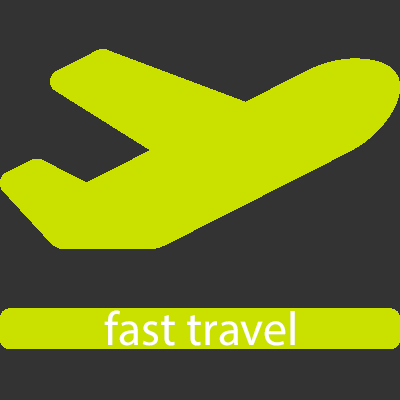
<style>
.page{position:relative;width:400px;height:400px;background:#333333}
.page>*{position:absolute;margin:0}
.t1{font:48px "MyriadPro-Regular";color:#ffffff}
</style>
<div class="page">
<p class="t1" style="left:104px;top:310px;width:191px;height:36px">fast travel</p>
</div>
